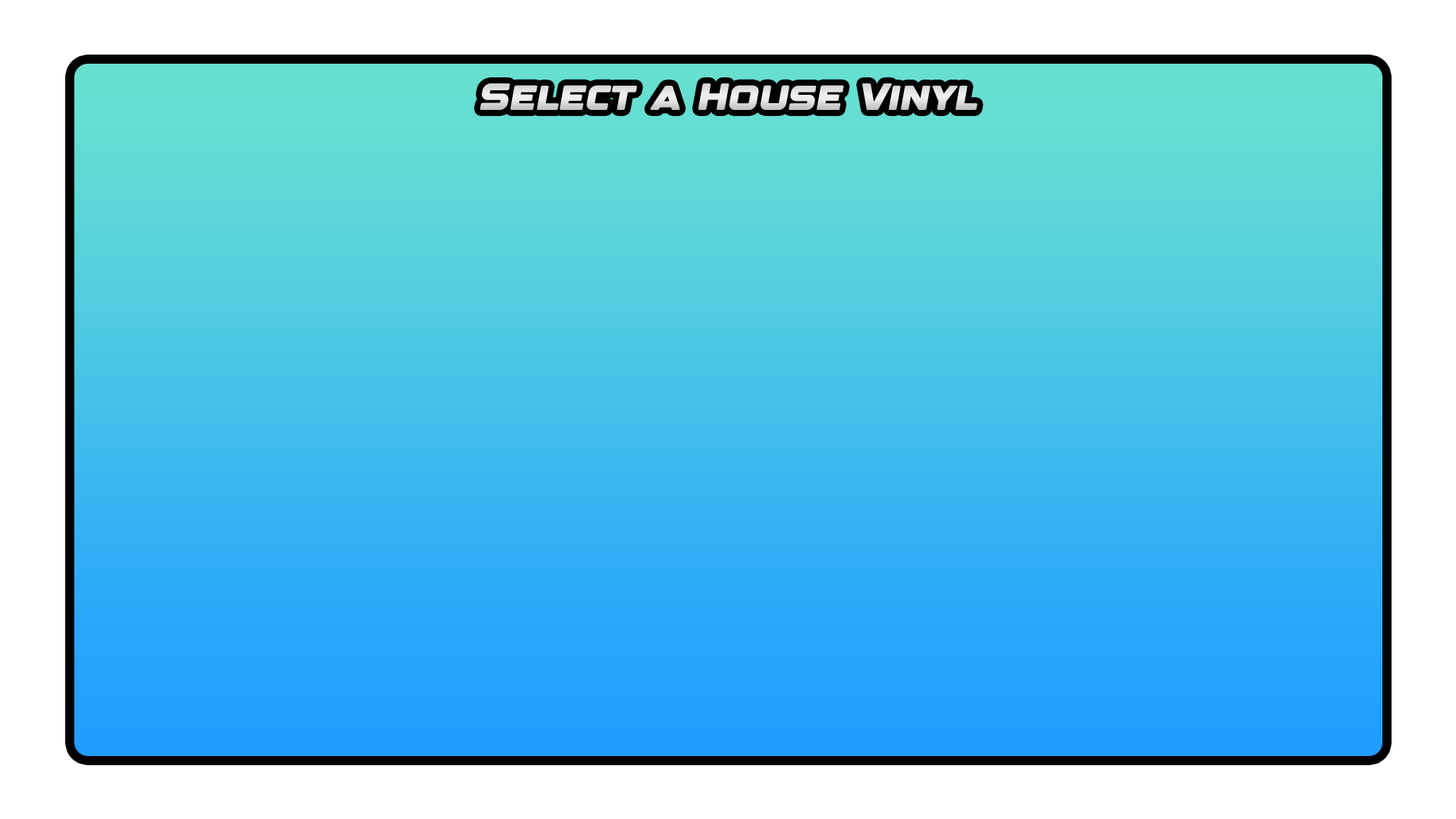
<style>
.page{position:relative;width:1456px;height:819px;background:#ffffff}
.page>*{position:absolute;margin:0}
.t1{font:37.9px "DesignerRegular";color:#dfdfdf}
</style>
<div class="page">
<p class="t1" style="left:480px;top:83px;width:497px;height:27px">Select a House Vinyl</p>
</div>
